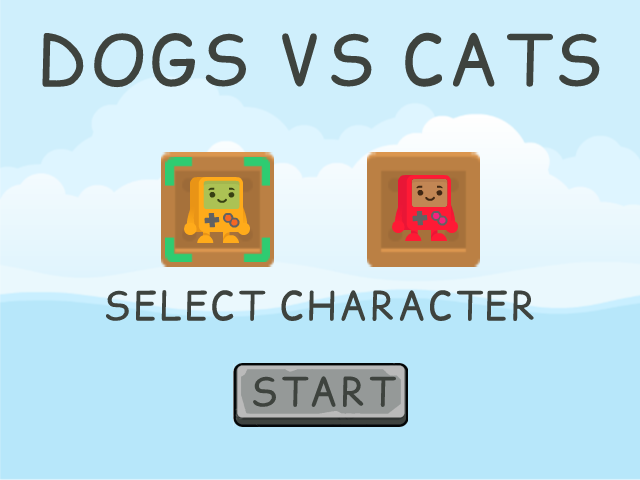
<style>
.page{position:relative;width:640px;height:480px;background:#b7e7fa}
.page>*{position:absolute;margin:0}
.t1{font:70px "ComicRelief";letter-spacing:0.05em;color:#3e433e}
.t2{font:40px "ComicRelief";letter-spacing:0.05em;color:#3e433e}
</style>
<div class="page">
<p class="t1" style="left:42px;top:31px;width:558px;height:57px">DOGS VS CATS</p>
<p class="t2" style="left:105px;top:289px;width:430px;height:33px">SELECT CHARACTER</p>
<p class="t2" style="left:252px;top:376px;width:145px;height:32px">START</p>
</div>
